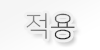
<style>
.page{position:relative;width:100px;height:50px}
.page>*{position:absolute;margin:0}
.t1{font:28px "NanumSquareL"}
</style>
<div class="page">
<p class="t1" style="left:26px;top:13px;width:49px;height:27px">적용</p>
</div>
